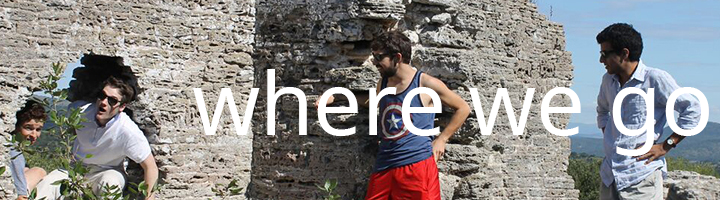
<style>
.page{position:relative;width:720px;height:200px}
.page>*{position:absolute;margin:0}
.t1{font:86.6px "NotoSans";color:#ffffff}
</style>
<div class="page">
<p class="t1" style="left:193px;top:69px;width:516px;height:87px">where we go</p>
</div>
